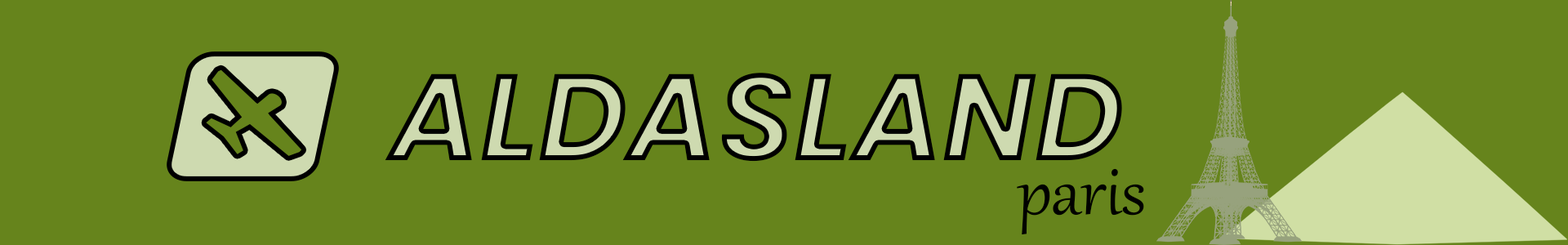
<style>
.page{position:relative;width:1568px;height:245px;background:#66841c}
.page>*{position:absolute;margin:0}
.t1{font:122.5px "Poppins-BoldItalic"}
.t2{font:83.3px "Gabriola";color:#000000}
</style>
<div class="page">
<p class="t1" style="left:385px;top:73px;width:737px;height:89px">ALDASLAND</p>
<p class="t2" style="left:1017px;top:168px;width:127px;height:66px">paris</p>
</div>
